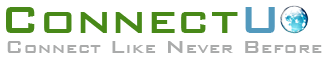
<style>
.page{position:relative;width:335px;height:60px;background:#ffffff}
.page>*{position:absolute;margin:0}
.t1{font:50px "BankGothicBT-Medium";color:#488918}
.t2{font:50px "BankGothicBT-Medium";color:#5299bd}
.t3{font:23px "BankGothicBT-Medium";color:#aaabab;font-variant:small-caps}
</style>
<div class="page">
<p class="t1" style="left:6px;top:7px;width:269px;height:26px">Connect<span class="t2">U</span></p>
<p class="t3" style="left:7px;top:41px;width:315px;height:12px">Connect Like Never Before</p>
</div>
